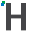
<style>
.page{position:relative;width:32px;height:32px;background:#ffffff}
.page>*{position:absolute;margin:0}
.t1{font:36px "NotoSansCJKkr-Medium";color:#454548;font-weight:bold;scale:0.95 1}
</style>
<div class="page">
<p class="t1" style="left:6px;top:3px;width:20px;height:28px">H</p>
</div>
